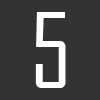
<style>
.page{position:relative;width:100px;height:100px;background:#333333}
.page>*{position:absolute;margin:0}
.t1{font:100px "AgencyFB-Reg";color:#ffffff}
</style>
<div class="page">
<p class="t1" style="left:35px;top:12px;width:31px;height:76px">5</p>
</div>
